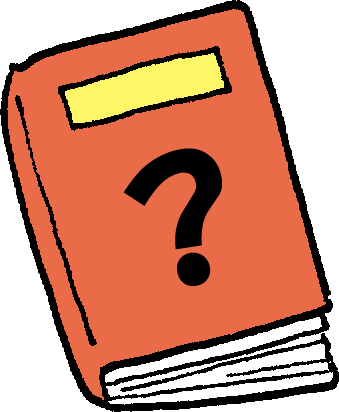
<style>
.page{position:relative;width:339px;height:412px;background:#ea6b48}
.page>*{position:absolute;margin:0}
.t1{font:166.7px "HGSoeiKakupoptai";color:#000000}
</style>
<div class="page">
<p class="t1" style="left:123px;top:148px;width:99px;height:138px;rotate:-17deg">？</p>
</div>
